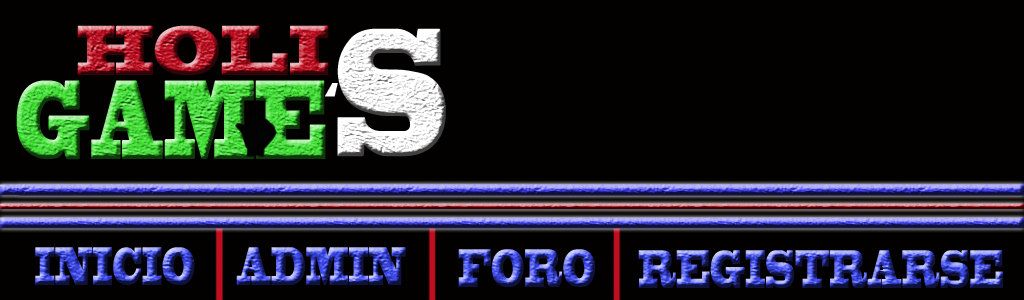
<style>
.page{position:relative;width:1024px;height:300px;background:#030000}
.page>*{position:absolute;margin:0}
.t1{font:65.6px "BlackoakStd";scale:0.58 1}
.t2{font:169.8px "BlackoakStd";color:#ffffff;scale:0.42 1}
.t3{font:104.7px "BlackoakStd";scale:0.38 1}
.t4{font:37.5px "BlackoakStd";color:#ffffff;scale:0.7 1}
.t5{font:50.5px "BlackoakStd";scale:0.37 1}
</style>
<div class="page">
<p class="t1" style="left:77px;top:25px;width:252px;height:50px">HOLI</p>
<p class="t2" style="left:337px;top:28px;width:109px;height:129px">S</p>
<p class="t3" style="left:16px;top:80px;width:310px;height:80px">GAME</p>
<p class="t4" style="left:325px;top:83px;width:13px;height:14px">‘</p>
<p class="t5" style="left:35px;top:247px;width:160px;height:38px">INICIO</p>
<p class="t5" style="left:236px;top:247px;width:170px;height:38px">ADMIN</p>
<p class="t5" style="left:458px;top:249px;width:138px;height:38px">FORO</p>
<p class="t5" style="left:638px;top:250px;width:365px;height:38px">REGISTRARSE</p>
</div>
